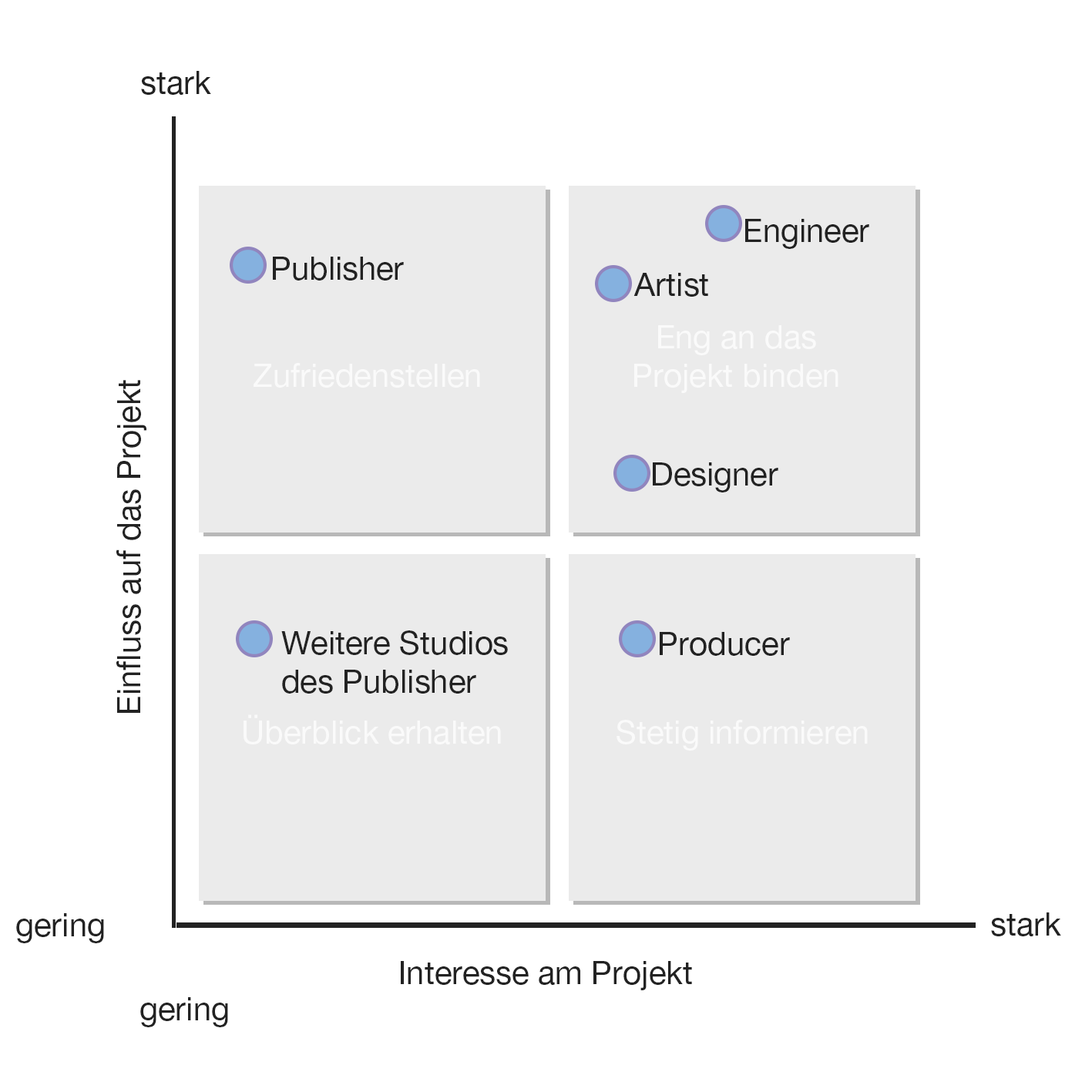
<style>
.page{position:relative;width:1092px;height:1092px;background:#ffffff}
.page>*{position:absolute;margin:0}
.t1{font:32.1px "HelveticaNeueLTPro-Roman";color:#222222}
.t2{font:32.1px "HelveticaNeueLTPro-Roman";color:#fafafa}
</style>
<div class="page">
<p class="t1" style="left:141px;top:71px;width:70px;height:24px">stark</p>
<p class="t1" style="left:745px;top:219px;width:124px;height:30px">Engineer</p>
<p class="t1" style="left:273px;top:257px;width:131px;height:24px">Publisher</p>
<p class="t1" style="left:633px;top:273px;width:75px;height:24px">Artist</p>
<p class="t2" style="left:634px;top:325px;width:204px;height:68px;text-align:center">Eng an das<br>Projekt binden</p>
<p class="t2" style="left:254px;top:363px;width:226px;height:25px">Zufriedenstellen</p>
<p class="t1" style="left:116px;top:380px;width:30px;height:333px;rotate:-90deg">Einfluss auf das Projekt</p>
<p class="t1" style="left:653px;top:462px;width:125px;height:30px">Designer</p>
<p class="t1" style="left:281px;top:630px;width:227px;height:64px">Weitere Studios<br>des Publisher</p>
<p class="t1" style="left:660px;top:632px;width:130px;height:24px">Producer</p>
<p class="t2" style="left:244px;top:714px;width:257px;height:30px">Überblick erhalten</p>
<p class="t2" style="left:617px;top:720px;width:251px;height:31px">Stetig informieren</p>
<p class="t1" style="left:16px;top:913px;width:88px;height:30px">gering</p>
<p class="t1" style="left:991px;top:912px;width:70px;height:24px">stark</p>
<p class="t1" style="left:401px;top:961px;width:291px;height:29px">Interesse am Projekt</p>
<p class="t1" style="left:140px;top:997px;width:88px;height:30px">gering</p>
</div>
